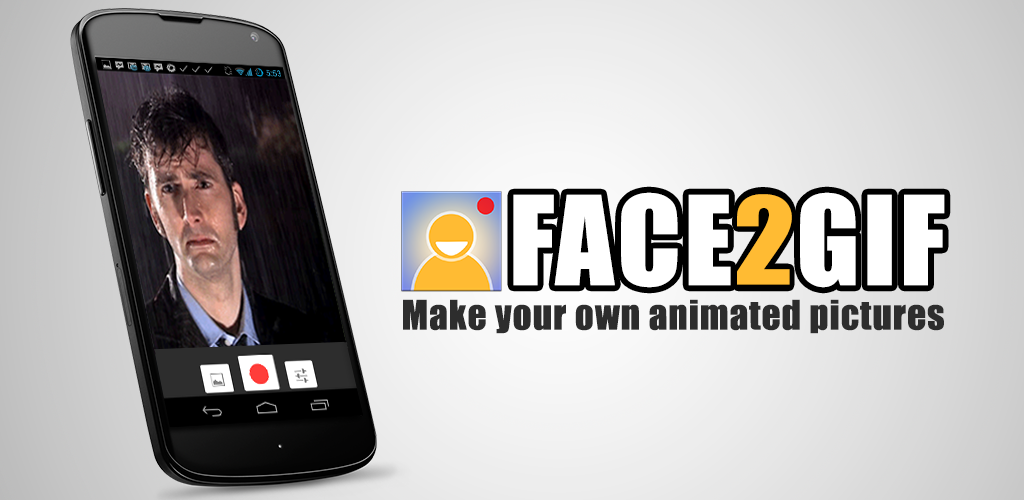
<style>
.page{position:relative;width:1024px;height:500px}
.page>*{position:absolute;margin:0}
.t1{font:114.1px "Impact";color:#ffffff;font-weight:bold}
.t2{font:114.1px "Impact";color:#000000;font-weight:bold}
.t3{font:111.7px "Impact";color:#ffbb33;font-weight:bold;scale:1.08 1}
.t4{font:37.5px "Impact";color:#2d2d2d;font-weight:bold}
</style>
<div class="page">
<p class="t1" style="left:513px;top:192px;width:432px;height:96px">FACE<span class="t2">2</span>GIF</p>
<p class="t3" style="left:737px;top:194px;width:55px;height:91px">2</p>
<p class="t4" style="left:403px;top:299px;width:541px;height:35px">Make your own animated pictures</p>
</div>
